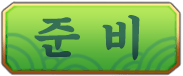
<style>
.page{position:relative;width:183px;height:76px}
.page>*{position:absolute;margin:0}
.t1{font:48px "MJemokBatang";letter-spacing:0.34em;color:#346e53;font-weight:bold}
</style>
<div class="page">
<p class="t1" style="left:34px;top:15px;width:106px;height:46px">준비</p>
</div>
